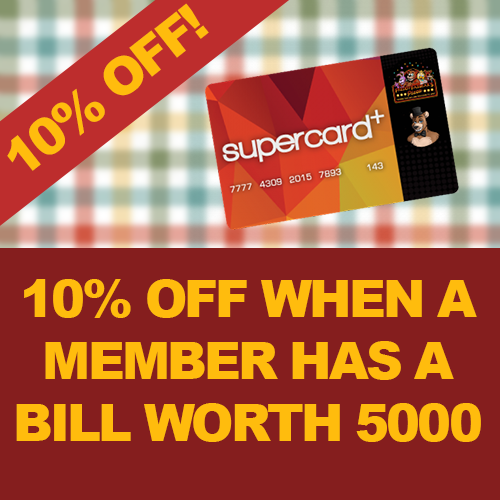
<style>
.page{position:relative;width:500px;height:500px;background:#851e1e}
.page>*{position:absolute;margin:0}
.t1{font:51.1px "Arial-Black";letter-spacing:-0.06em;color:#ffbc0d}
.t2{font:51.4px "Arial-Black";letter-spacing:-0.06em;color:#ffbc0d}
</style>
<div class="page">
<p class="t1" style="left:7px;top:3px;width:202px;height:168px;rotate:-38deg">10% OFF!</p>
<p class="t2" style="left:16px;top:279px;width:465px;height:163px;text-align:center">10% OFF WHEN A MEMBER HAS A BILL WORTH 5000</p>
</div>
